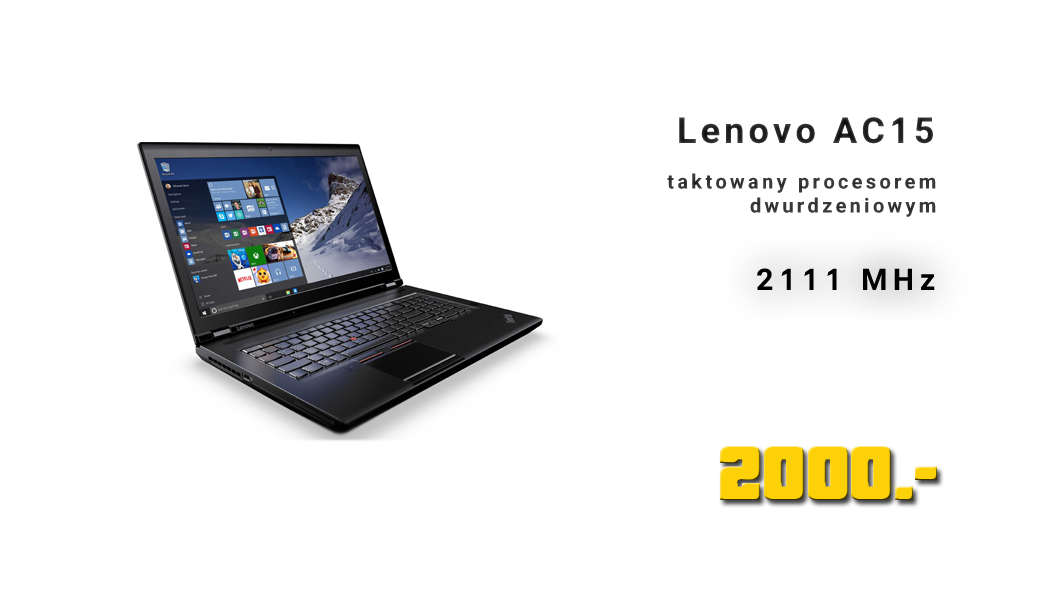
<style>
.page{position:relative;width:1050px;height:600px;background:#ffffff}
.page>*{position:absolute;margin:0}
.t1{font:20px "Asimov";letter-spacing:-0.025em;color:#313031}
.t2{font:36px "AsimovDist";letter-spacing:-0.075em;color:#313031}
.t3{font:30px "AsimovDist";color:#010001}
.t4{font:85px "PricedownBl-Regular";color:#fcd108}
</style>
<div class="page">
<p class="t1" style="left:667px;top:117px;width:269px;height:100px;text-align:right"><span class="t2">Lenovo AC15<br><br></span>taktowany procesorem dwurdzeniowym</p>
<p class="t3" style="left:757px;top:268px;width:178px;height:22px">2111 MHz</p>
<p class="t4" style="left:720px;top:446px;width:217px;height:54px">2000.-</p>
</div>
